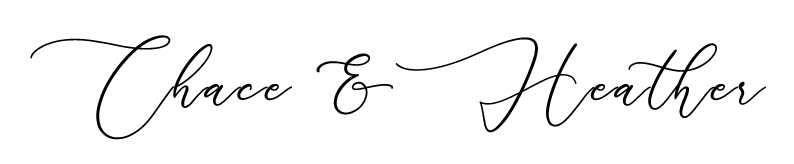
<style>
.page{position:relative;width:794px;height:164px;background:#ffffff}
.page>*{position:absolute;margin:0}
.t1{font:91px "LovelyGarden";color:#000000;font-weight:bold}
</style>
<div class="page">
<p class="t1" style="left:30px;top:35px;width:736px;height:105px">Chace &amp;Heather</p>
</div>
